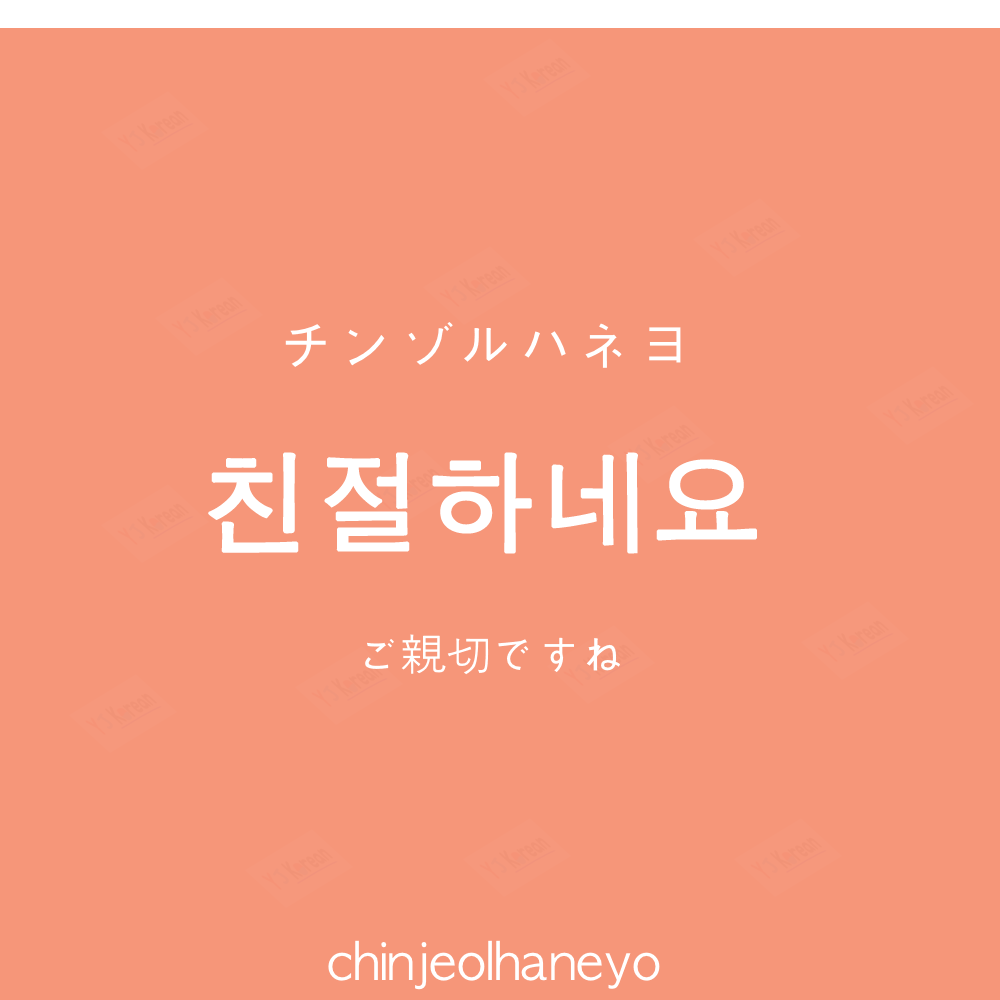
<style>
.page{position:relative;width:1000px;height:1000px;background:#f69679}
.page>*{position:absolute;margin:0}
.t1{font:60px "AppleGothic";color:#ffffff}
.t2{font:110px "AppleGothic";color:#ffffff;font-weight:bold}
.t3{font:45px "AppleGothic";color:#ffffff}
.t4{font:50px "AppleGothic";color:#ffffff}
</style>
<div class="page">
<p class="t1" style="left:285px;top:322px;width:396px;height:46px">チンゾルハネヨ</p>
<p class="t2" style="left:208px;top:452px;width:549px;height:102px">친절하네요</p>
<p class="t3" style="left:365px;top:634px;width:255px;height:41px">ご親切ですね</p>
<p class="t4" style="left:328px;top:940px;width:332px;height:50px">chinjeolhaneyo</p>
</div>
